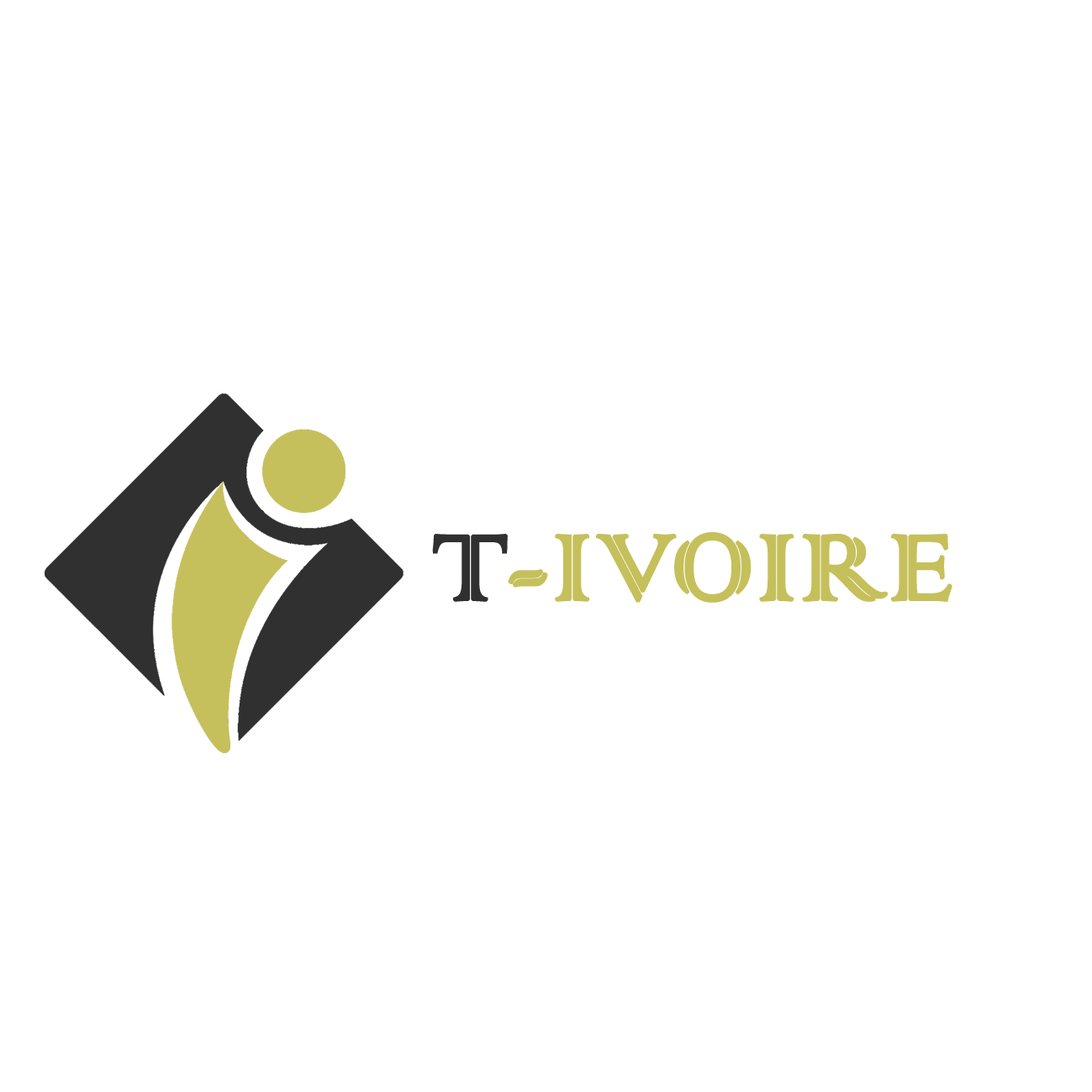
<style>
.page{position:relative;width:1092px;height:1092px;background:#ffffff}
.page>*{position:absolute;margin:0}
.t1{font:122.6px "ColonnaMT";color:#c5c05b;font-weight:bold}
.t2{font:122.6px "ColonnaMT";color:#303030;font-weight:bold}
</style>
<div class="page">
<p class="t1" style="left:432px;top:532px;width:520px;height:71px"><span class="t2">T</span>-IVOIRE</p>
</div>
